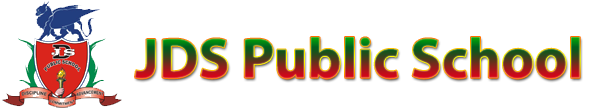
<style>
.page{position:relative;width:600px;height:110px;background:#ffffff}
.page>*{position:absolute;margin:0}
.t1{font:57.3px "MyriadPro-Bold"}
</style>
<div class="page">
<p class="t1" style="left:135px;top:37px;width:445px;height:42px">JDS Public School</p>
</div>
